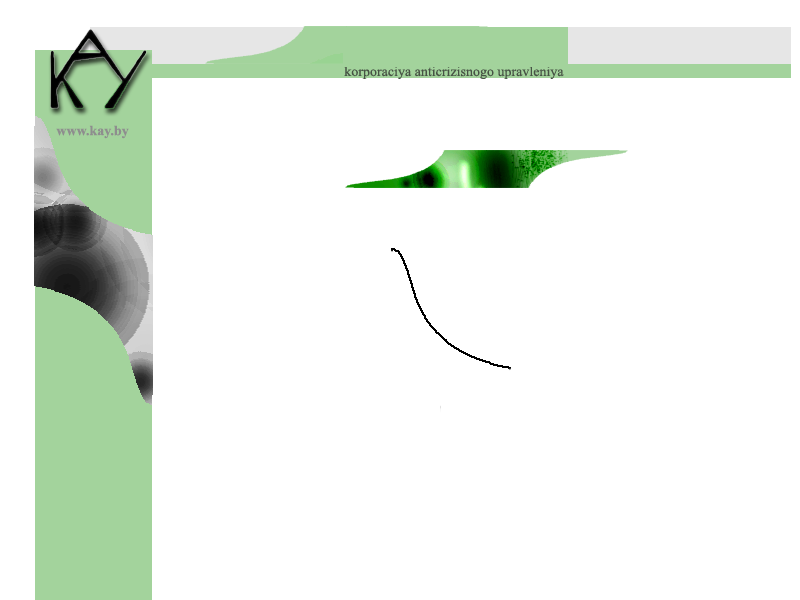
<style>
.page{position:relative;width:800px;height:600px;background:#ffffff}
.page>*{position:absolute;margin:0}
.t1{font:14px "TimesNewRomanPSMT";color:#475345}
.t2{font:14px "TimesNewRomanPS-BoldMT";color:#8e8e8e}
</style>
<div class="page">
<p class="t1" style="left:344px;top:66px;width:220px;height:13px">korporaciya anticrizisnogo upravleniya</p>
<p class="t2" style="left:56px;top:125px;width:73px;height:14px">www.kay.by</p>
</div>
